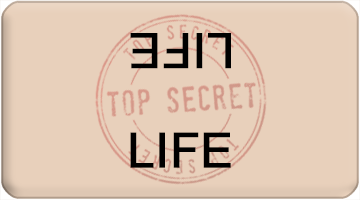
<style>
.page{position:relative;width:360px;height:200px;background:#e8d0bb}
.page>*{position:absolute;margin:0}
.t1{font:48px "ArialMT";color:#000000;font-weight:bold}
</style>
<div class="page">
<p class="t1" style="left:130px;top:33px;width:101px;height:36px;rotate:180deg">LIFE</p>
<p class="t1" style="left:130px;top:132px;width:101px;height:36px">LIFE</p>
</div>
